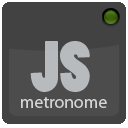
<style>
.page{position:relative;width:128px;height:128px;background:#424242}
.page>*{position:absolute;margin:0}
.t1{font:68.3px "PoplarStd";color:#b8bbbe}
.t2{font:17.6px "MyriadPro-Regular";color:#d5d5d5}
</style>
<div class="page">
<p class="t1" style="left:30px;top:41px;width:60px;height:51px">JS</p>
<p class="t2" style="left:21px;top:97px;width:86px;height:11px">metronome</p>
</div>
